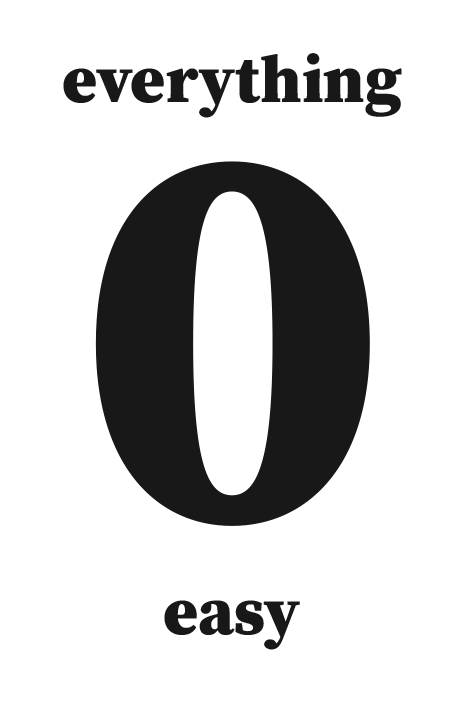
<style>
.page{position:relative;width:464px;height:716px;background:#ffffff}
.page>*{position:absolute;margin:0}
.t1{font:66.7px "SourceSerifRoman-Black";color:#181818}
.t2{font:555.6px "SourceSerifRoman-Black";color:#181818}
</style>
<div class="page">
<p class="t1" style="left:63px;top:53px;width:339px;height:65px">everything</p>
<p class="t2" style="left:95px;top:161px;width:275px;height:365px">0</p>
<p class="t1" style="left:164px;top:600px;width:136px;height:50px">easy</p>
</div>
